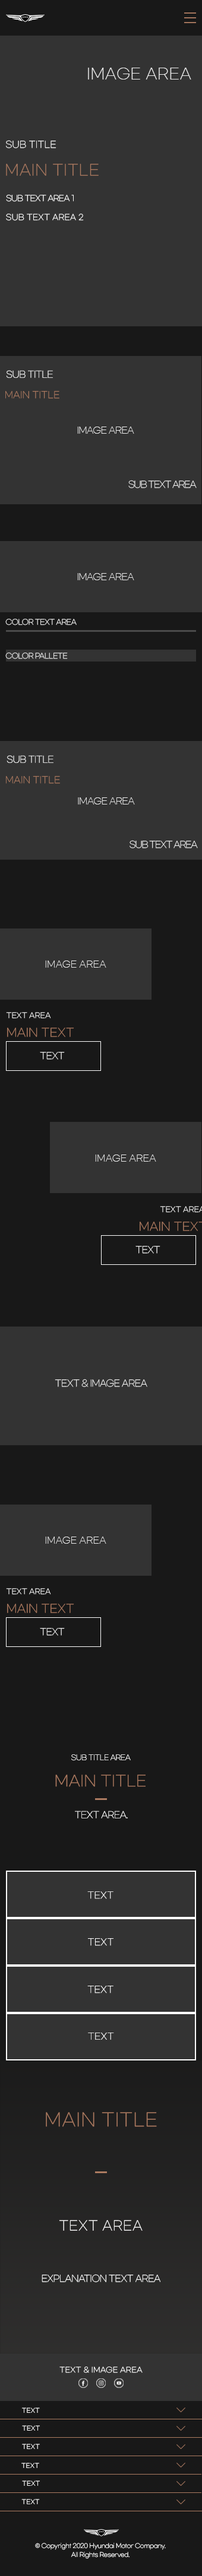
<style>
.page{position:relative;width:202px;height:2576px;background:#333333}
.page>*{position:absolute;margin:0}
.t1{font:14.8px "GmarketSansTTFLight";letter-spacing:0.018em;color:#eeeeee}
.t2{font:8.9px "GmarketSansTTFLight";color:#ffffff}
.t3{font:14.8px "GmarketSansTTFLight";letter-spacing:0.018em;color:#ad7b61}
.t4{font:7.7px "GmarketSansTTFLight";letter-spacing:-0.05em;color:#ffffff}
.t5{font:7.7px "GmarketSansTTFLight";letter-spacing:0.018em;color:#ffffff}
.t6{font:8.9px "GmarketSansTTFLight";letter-spacing:-0.05em;color:#ffffff}
.t7{font:8.9px "GmarketSansTTFLight";color:#ad7b61}
.t8{font:8.9px "GmarketSansTTFLight";letter-spacing:-0.05em;color:#eeeeee}
.t9{font:8.9px "GmarketSansTTFLight";letter-spacing:-0.1em;color:#eeeeee}
.t10{font:7.1px "GmarketSansTTFLight";letter-spacing:-0.05em;color:#eeeeee}
.t11{font:8.9px "GmarketSansTTFLight";color:#eeeeee}
.t12{font:7.1px "GmarketSansTTFLight";color:#eeeeee}
.t13{font:11.3px "GmarketSansTTFLight";color:#ad7b61}
.t14{font:7.1px "GmarketSansTTFLight";letter-spacing:-0.05em;color:#ffffff}
.t15{font:14.8px "GmarketSansTTFLight";color:#ad7b61}
.t16{font:17.8px "GmarketSansTTFLight";letter-spacing:0.018em;color:#ad7b61}
.t17{font:13.1px "GmarketSansTTFLight";letter-spacing:0.018em;color:#ffffff}
.t18{font:7.1px "GmarketSansTTFLight";letter-spacing:0.018em;color:#ffffff}
.t19{font:5.9px "GmarketSansTTFLight";letter-spacing:0.018em;color:#ffffff}
.t20{font:5.9px/8.9px "GmarketSansTTFLight";letter-spacing:-0.03em;color:#ffffff}
</style>
<div class="page">
<p class="t1" style="left:88px;top:68px;width:103px;height:11px">IMAGE AREA</p>
<p class="t2" style="left:6px;top:140px;width:50px;height:8px">SUB TITLE</p>
<p class="t3" style="left:6px;top:164px;width:92px;height:12px">MAIN TITLE</p>
<p class="t4" style="left:6px;top:195px;width:68px;height:7px">SUB TEXT AREA 1</p>
<p class="t5" style="left:6px;top:214px;width:78px;height:7px">SUB TEXT AREA 2</p>
<p class="t6" style="left:6px;top:370px;width:47px;height:8px">SUB TITLE</p>
<p class="t7" style="left:5px;top:391px;width:54px;height:8px">MAIN TITLE</p>
<p class="t8" style="left:77px;top:427px;width:57px;height:7px">IMAGE AREA</p>
<p class="t9" style="left:128px;top:480px;width:68px;height:8px">SUB TEXT AREA</p>
<p class="t8" style="left:77px;top:573px;width:57px;height:7px">IMAGE AREA</p>
<p class="t10" style="left:5px;top:619px;width:72px;height:6px">COLOR TEXT AREA</p>
<p class="t10" style="left:5px;top:653px;width:63px;height:6px">COLOR PALLETE</p>
<p class="t6" style="left:7px;top:755px;width:46px;height:8px">SUB TITLE</p>
<p class="t7" style="left:6px;top:776px;width:54px;height:8px">MAIN TITLE</p>
<p class="t8" style="left:78px;top:797px;width:57px;height:7px">IMAGE AREA</p>
<p class="t9" style="left:129px;top:840px;width:69px;height:8px">SUB TEXT AREA</p>
<p class="t11" style="left:45px;top:961px;width:61px;height:7px">IMAGE AREA</p>
<p class="t12" style="left:6px;top:1012px;width:45px;height:7px">TEXT AREA</p>
<p class="t13" style="left:7px;top:1028px;width:67px;height:9px">MAIN TEXT</p>
<p class="t8" style="left:40px;top:1052px;width:25px;height:8px">TEXT</p>
<p class="t11" style="left:95px;top:1155px;width:61px;height:7px">IMAGE AREA</p>
<p class="t8" style="left:135px;top:1246px;width:25px;height:8px">TEXT</p>
<p class="t8" style="left:55px;top:1379px;width:92px;height:8px">TEXT &amp; IMAGE AREA</p>
<p class="t11" style="left:45px;top:1537px;width:61px;height:7px">IMAGE AREA</p>
<p class="t12" style="left:6px;top:1588px;width:45px;height:7px">TEXT AREA</p>
<p class="t13" style="left:7px;top:1604px;width:67px;height:9px">MAIN TEXT</p>
<p class="t8" style="left:40px;top:1628px;width:25px;height:8px">TEXT</p>
<p class="t14" style="left:71px;top:1754px;width:60px;height:7px">SUB TITLE AREA</p>
<p class="t15" style="left:55px;top:1774px;width:90px;height:13px">MAIN TITLE</p>
<p class="t6" style="left:75px;top:1811px;width:53px;height:7px">TEXT AREA.</p>
<p class="t2" style="left:87px;top:1891px;width:26px;height:8px">TEXT</p>
<p class="t2" style="left:88px;top:1938px;width:25px;height:8px">TEXT</p>
<p class="t2" style="left:87px;top:1986px;width:26px;height:7px">TEXT</p>
<p class="t2" style="left:88px;top:2033px;width:26px;height:7px">TEXT</p>
<p class="t16" style="left:46px;top:2112px;width:111px;height:15px">MAIN TITLE</p>
<p class="t17" style="left:59px;top:2220px;width:83px;height:11px">TEXT AREA</p>
<p class="t6" style="left:42px;top:2274px;width:119px;height:8px">EXPLANATION TEXT AREA</p>
<p class="t18" style="left:59px;top:2367px;width:83px;height:6px">TEXT &amp; IMAGE AREA</p>
<p class="t19" style="left:22px;top:2408px;width:18px;height:5px">TEXT</p>
<p class="t19" style="left:22px;top:2425px;width:18px;height:6px">TEXT</p>
<p class="t19" style="left:22px;top:2444px;width:18px;height:5px">TEXT</p>
<p class="t19" style="left:21px;top:2463px;width:18px;height:5px">TEXT</p>
<p class="t19" style="left:22px;top:2480px;width:18px;height:6px">TEXT</p>
<p class="t19" style="left:21px;top:2499px;width:19px;height:5px">TEXT</p>
<p class="t20" style="left:35px;top:2543px;width:131px;height:16px;text-align:center">© Copyright 2020 Hyundai Motor Company.<br>All Rights Reserved.</p>
</div>
